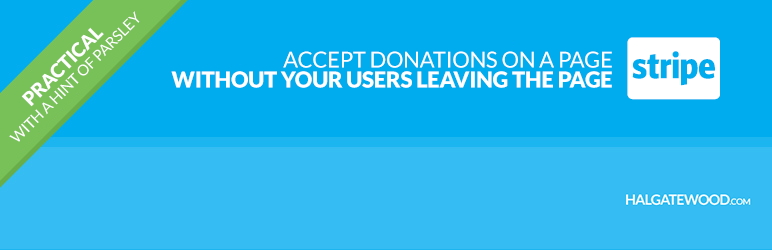
<style>
.page{position:relative;width:772px;height:250px;background:#00acee}
.page>*{position:absolute;margin:0}
.t1{font:15px "Lato-Regular";letter-spacing:-0.01em;color:#ffffff}
.t2{font:19.1px "Lato-Black";letter-spacing:-0.01em;color:#ffffff}
.t3{font:22px/20px "Lato-Black";letter-spacing:-0.01em;color:#ffffff}
.t4{font:22px/20px "Lato-Regular";letter-spacing:-0.01em;color:#ffffff}
</style>
<div class="page">
<p class="t1" style="left:9px;top:11px;width:131px;height:131px;rotate:-45deg">WITH A HINT OF PARSLEY</p>
<p class="t2" style="left:21px;top:27px;width:83px;height:80px;rotate:-45deg">PRACTICAL</p>
<p class="t3" style="left:171px;top:51px;width:441px;height:37px;text-align:right"><span class="t4">ACCEPT DONATIONS ON A PAGE<br></span>WITHOUT YOUR USERS LEAVING THE PAGE</p>
</div>
